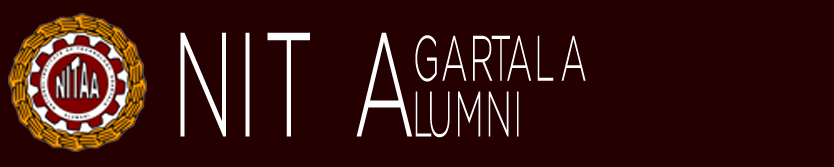
<style>
.page{position:relative;width:834px;height:167px;background:#240000}
.page>*{position:absolute;margin:0}
.t1{font:147.5px "RegencieLight";letter-spacing:0.1em;color:#fcfdff;scale:0.53 1}
.t2{font:64px/55.7px "RegencieLight";letter-spacing:0.1em;color:#fcfdff;scale:0.53 1}
</style>
<div class="page">
<p class="t1" style="left:180px;top:32px;width:232px;height:105px">NIT A</p>
<p class="t2" style="left:415px;top:35px;width:171px;height:103px">GARTALA<br>LUMNI</p>
</div>
